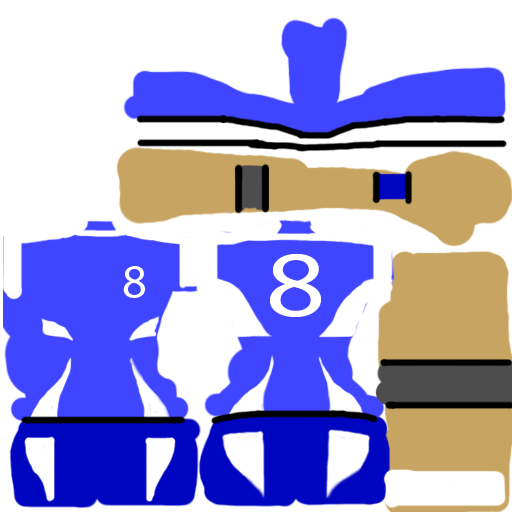
<style>
.page{position:relative;width:512px;height:512px;background:#ffffff}
.page>*{position:absolute;margin:0}
.t1{font:94.4px "MyriadPro-Regular";color:#ffffff;scale:1.23 1}
.t2{font:48px "MyriadPro-Regular";color:#ffffff}
</style>
<div class="page">
<p class="t1" style="left:270px;top:253px;width:51px;height:64px">8</p>
<p class="t2" style="left:123px;top:266px;width:22px;height:32px">8</p>
</div>
